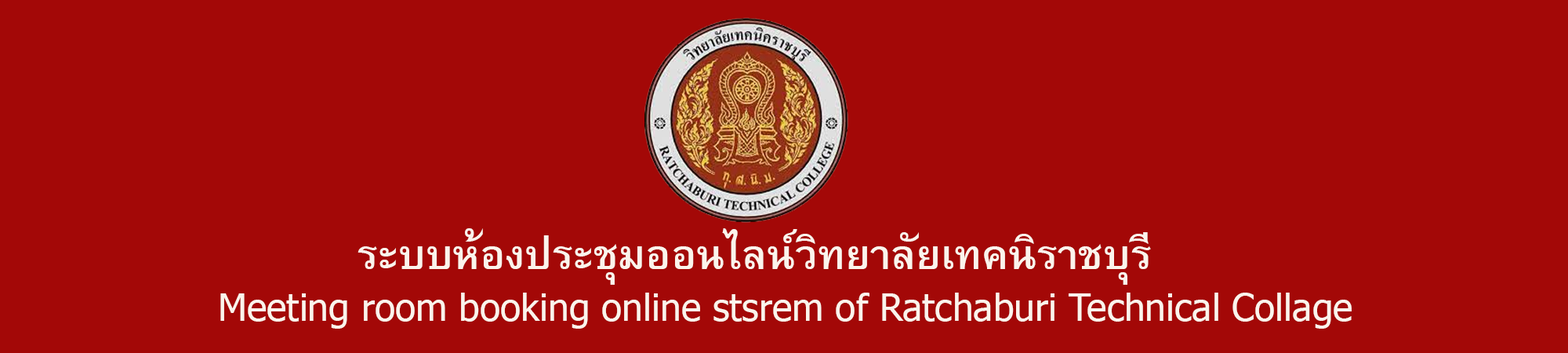
<style>
.page{position:relative;width:1568px;height:353px;background:#a30807}
.page>*{position:absolute;margin:0}
.t1{font:56.4px "BrowalliaUPC-Bold";color:#fbf4ec}
.t2{font:37.6px "Tahoma";color:#fbf4ec}
</style>
<div class="page">
<p class="t1" style="left:358px;top:228px;width:793px;height:57px">ระบบห้องประชุมออนไลน์วิทยาลัยเทคนิราชบุรี</p>
<p class="t2" style="left:220px;top:292px;width:1132px;height:36px">Meeting room booking online stsrem of Ratchaburi Technical Collage</p>
</div>
